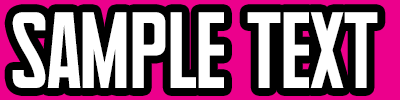
<style>
.page{position:relative;width:400px;height:100px;background:#000000}
.page>*{position:absolute;margin:0}
.t1{font:74px "Supertalls";color:#ffffff}
</style>
<div class="page">
<p class="t1" style="left:12px;top:12px;width:366px;height:76px">Sample text</p>
</div>
